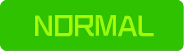
<style>
.page{position:relative;width:184px;height:52px;background:#2fc200}
.page>*{position:absolute;margin:0}
.t1{font:24px "KafuTechnoStd-HV";color:#a7ff08;scale:0.92 1}
</style>
<div class="page">
<p class="t1" style="left:35px;top:15px;width:119px;height:22px">NORMAL</p>
</div>
